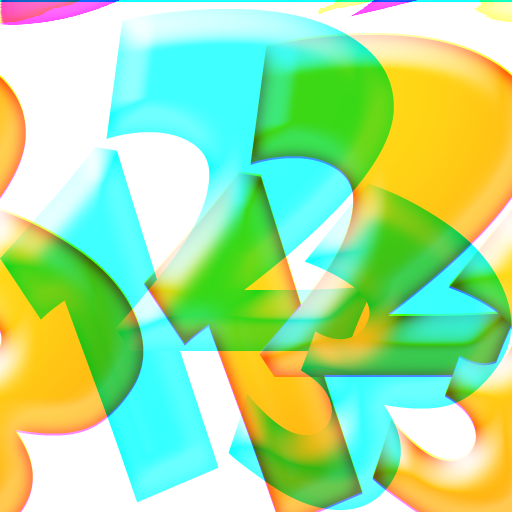
<style>
.page{position:relative;width:512px;height:512px;background:#ffffff}
.page>*{position:absolute;margin:0}
.t1{font:448.2px "ShowcardGothic-Reg";scale:1.53 1}
.t2{font:441.1px "ShowcardGothic-Reg";scale:0.92 1}
.t3{font:406.7px "ShowcardGothic-Reg";scale:1.21 1}
</style>
<div class="page">
<p class="t1" style="left:106px;top:6px;width:288px;height:343px">2</p>
<p class="t2" style="left:0px;top:145px;width:219px;height:356px;rotate:-23deg">1</p>
<p class="t3" style="left:228px;top:181px;width:284px;height:327px;rotate:35deg">3</p>
</div>
